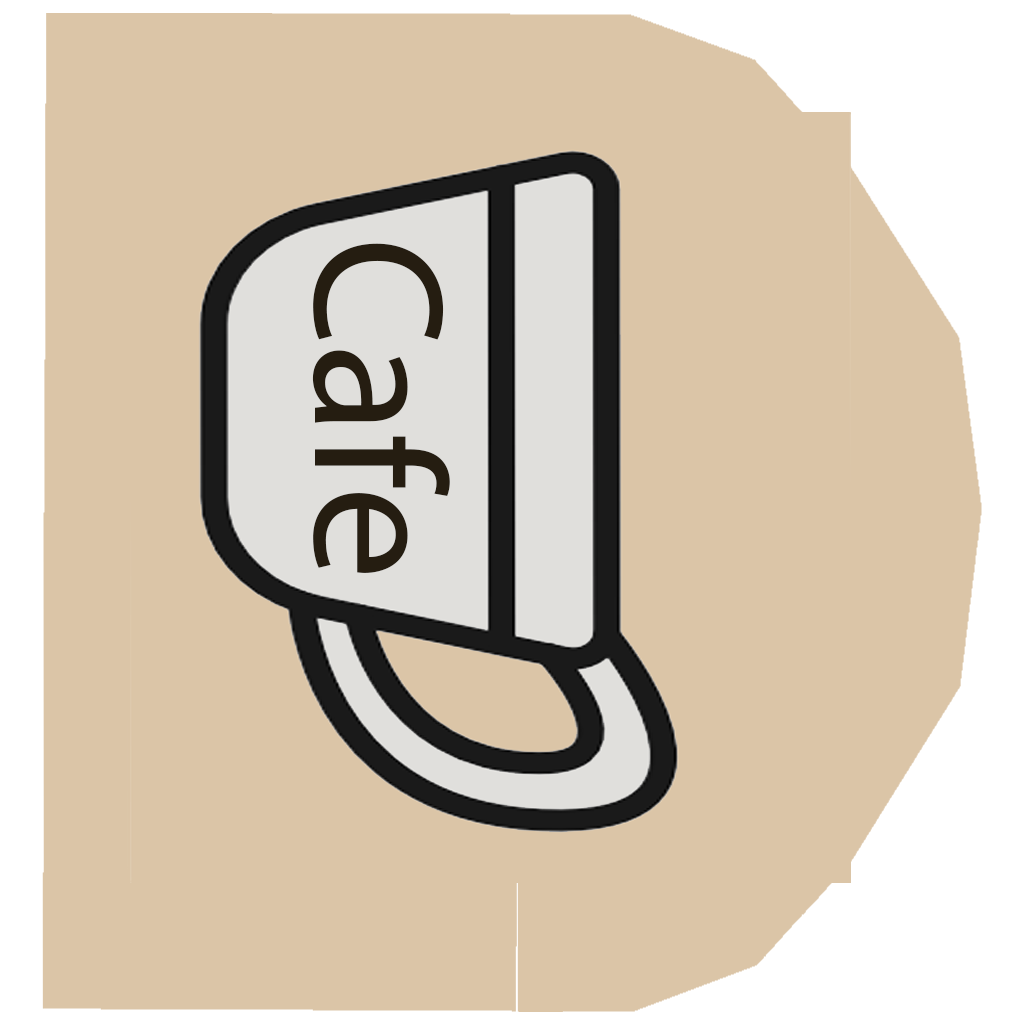
<style>
.page{position:relative;width:1024px;height:1024px;background:#dbc5a7}
.page>*{position:absolute;margin:0}
.t1{font:186.9px "MyriadPro-Regular";color:#251d11}
</style>
<div class="page">
<p class="t1" style="left:312px;top:243px;width:138px;height:330px;rotate:90deg">Cafe</p>
</div>
